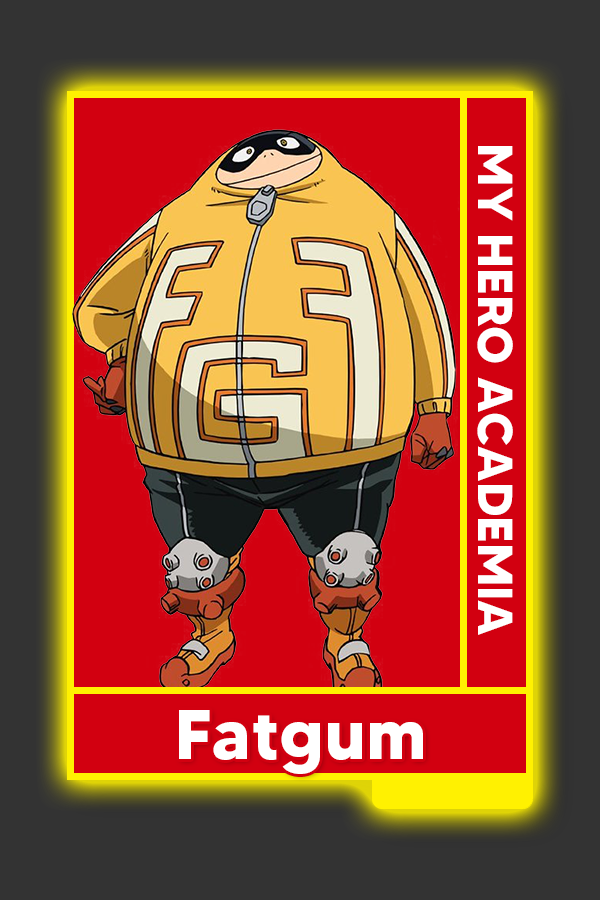
<style>
.page{position:relative;width:600px;height:900px;background:#d20010}
.page>*{position:absolute;margin:0}
.t1{font:48.8px "MADETOMMY-Bold";color:#ffffff}
.t2{font:70.1px "MADETOMMY-Bold";color:#ffffff}
</style>
<div class="page">
<p class="t1" style="left:477px;top:146px;width:36px;height:489px;rotate:90deg">MY HERO ACADEMIA</p>
<p class="t2" style="left:179px;top:710px;width:244px;height:64px">Fatgum</p>
</div>
